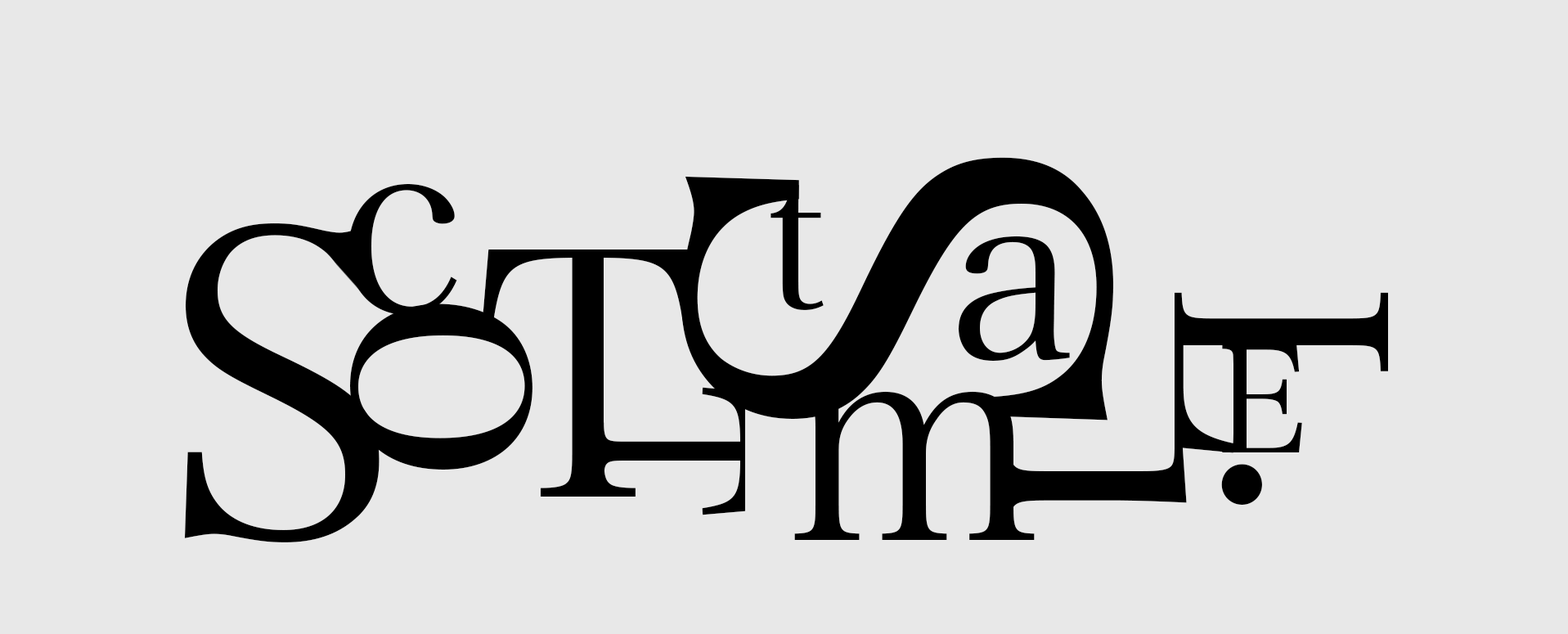
<style>
.page{position:relative;width:1568px;height:634px;background:#e8e8e8}
.page>*{position:absolute;margin:0}
.t1{font:576.1px "HiraMinProN-W3";color:#000000}
.t2{font:245.6px "HiraMinProN-W3";color:#000000}
.t3{font:188.3px "HiraMinProN-W3";color:#000000}
.t4{font:425.9px "HiraMinProN-W3";color:#000000}
.t5{font:234.9px "HiraMinProN-W3";color:#000000}
.t6{font:341.3px "HiraMinProN-W3";color:#000000}
.t7{font:294.7px "HiraMinProN-W3";color:#000000}
.t8{font:341.7px "HiraMinProN-W3";color:#000000}
.t9{font:148px "HiraMinProN-W3";color:#000000}
.t10{font:201.9px "HiraMinProN-W3";color:#000000}
.t11{font:284.9px "HiraMinProN-W3";color:#000000}
.t12{font:357.2px "HiraMinProN-W3";color:#000000}
</style>
<div class="page">
<p class="t1" style="left:681px;top:157px;width:432px;height:263px;rotate:-90deg">S</p>
<p class="t2" style="left:348px;top:184px;width:109px;height:132px">c</p>
<p class="t3" style="left:771px;top:185px;width:53px;height:125px">t</p>
<p class="t4" style="left:184px;top:223px;width:196px;height:319px">S</p>
<p class="t5" style="left:959px;top:236px;width:111px;height:125px">a</p>
<p class="t6" style="left:482px;top:249px;width:212px;height:247px">T</p>
<p class="t7" style="left:1175px;top:292px;width:213px;height:161px;rotate:90deg">L</p>
<p class="t8" style="left:350px;top:303px;width:182px;height:167px;rotate:90deg">o</p>
<p class="t9" style="left:1222px;top:344px;width:80px;height:108px">E</p>
<p class="t10" style="left:599px;top:387px;width:146px;height:128px;rotate:90deg">T</p>
<p class="t11" style="left:794px;top:391px;width:241px;height:149px">m</p>
<p class="t12" style="left:1002px;top:444px;width:260px;height:83px;rotate:90deg">i</p>
</div>
